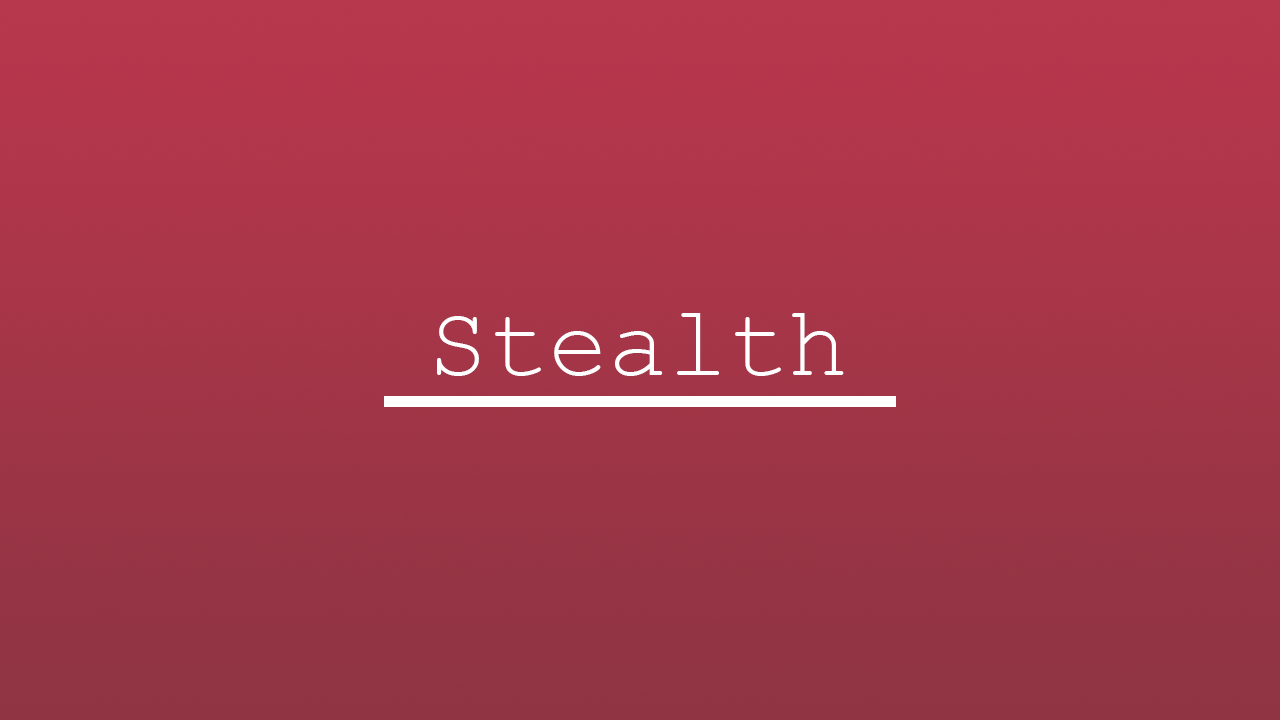
<style>
.page{position:relative;width:1280px;height:720px}
.page>*{position:absolute;margin:0}
.t1{font:100px "CourierNewPSMT";color:#ffffff}
</style>
<div class="page">
<p class="t1" style="left:437px;top:313px;width:407px;height:63px">Stealth</p>
</div>
